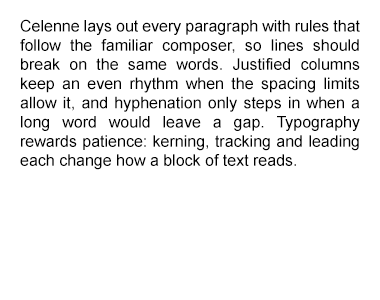
<style>
.page{position:relative;width:380px;height:300px;background:#ffffff}
.page>*{position:absolute;margin:0}
.t1{font:16px "ArialMT";color:#000000}
</style>
<div class="page">
<p class="t1" style="left:20px;top:19px;width:340px;height:151px;text-align:justify">Celenne lays out every paragraph with rules that follow the familiar composer, so lines should break on the same words. Justified columns keep an even rhythm when the spacing limits allow it, and hyphenation only steps in when a long word would leave a gap. Typography rewards patience: kerning, tracking and leading each change how a block of text reads.</p>
</div>
